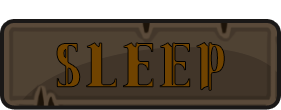
<style>
.page{position:relative;width:281px;height:110px}
.page>*{position:absolute;margin:0}
.t1{font:65px "Hangyaku";letter-spacing:0.1em;color:#704300;font-weight:bold}
</style>
<div class="page">
<p class="t1" style="left:56px;top:42px;width:169px;height:49px">SLEEP</p>
</div>
